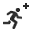
<style>
.page{position:relative;width:32px;height:32px;background:#ffffff}
.page>*{position:absolute;margin:0}
.t1{font:14px "Impact";color:#282828}
</style>
<div class="page">
<p class="t1" style="left:23px;top:3px;width:6px;height:6px">+</p>
</div>
